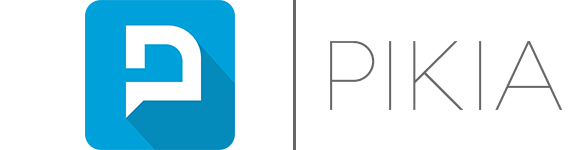
<style>
.page{position:relative;width:584px;height:150px;background:#ffffff}
.page>*{position:absolute;margin:0}
.t1{font:92px "SlimJoe";color:#666666}
</style>
<div class="page">
<p class="t1" style="left:330px;top:41px;width:232px;height:69px">Pikia</p>
</div>
